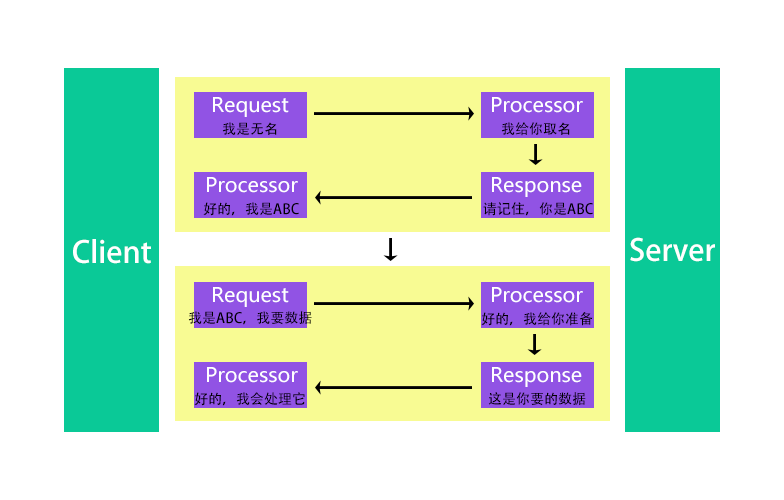
<style>
.page{position:relative;width:784px;height:500px;background:#ffffff}
.page>*{position:absolute;margin:0}
.t1{font:20px "MicrosoftYaHei";color:#ffffff}
.t2{font:14px "AdobeHeitiStd-Regular";color:#000000}
.t3{font:30px "AdobeHeitiStd-Regular";color:#ffffff}
</style>
<div class="page">
<p class="t1" style="left:213px;top:97px;width:76px;height:20px">Request</p>
<p class="t1" style="left:492px;top:97px;width:91px;height:16px">Processor</p>
<p class="t2" style="left:222px;top:122px;width:55px;height:13px">我是无名</p>
<p class="t2" style="left:501px;top:122px;width:69px;height:14px">我给你取名</p>
<p class="t1" style="left:207px;top:177px;width:91px;height:16px">Processor</p>
<p class="t1" style="left:492px;top:177px;width:90px;height:20px">Response</p>
<p class="t2" style="left:203px;top:202px;width:96px;height:14px">好的，我是ABC</p>
<p class="t2" style="left:483px;top:202px;width:110px;height:14px">请记住，你是ABC</p>
<p class="t3" style="left:73px;top:239px;width:78px;height:25px">Client</p>
<p class="t3" style="left:630px;top:237px;width:85px;height:25px">Server</p>
<p class="t1" style="left:213px;top:287px;width:76px;height:20px">Request</p>
<p class="t1" style="left:492px;top:287px;width:91px;height:16px">Processor</p>
<p class="t2" style="left:188px;top:311px;width:124px;height:14px">我是ABC，我要数据</p>
<p class="t2" style="left:481px;top:312px;width:112px;height:14px">好的，我给你准备</p>
<p class="t1" style="left:207px;top:367px;width:91px;height:16px">Processor</p>
<p class="t1" style="left:492px;top:367px;width:90px;height:20px">Response</p>
<p class="t2" style="left:194px;top:392px;width:111px;height:14px">好的，我会处理它</p>
<p class="t2" style="left:488px;top:392px;width:98px;height:14px">这是你要的数据</p>
</div>
